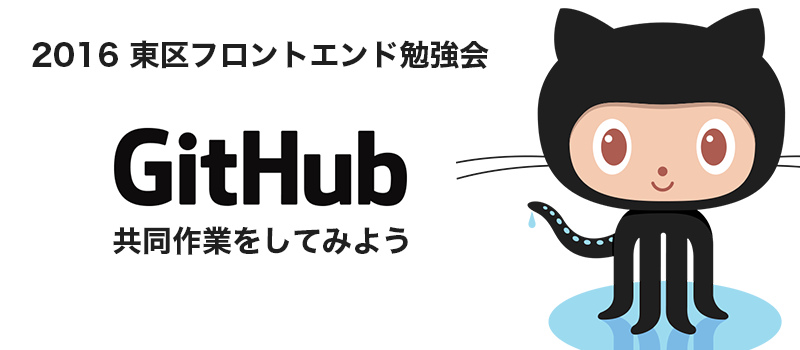
<style>
.page{position:relative;width:800px;height:350px;background:#ffffff}
.page>*{position:absolute;margin:0}
.t1{font:30px "HiraginoSans-W7";color:#201f1f}
</style>
<div class="page">
<p class="t1" style="left:32px;top:40px;width:457px;height:29px">2016 東区フロントエンド勉強会</p>
<p class="t1" style="left:113px;top:226px;width:295px;height:29px">共同作業をしてみよう</p>
</div>
